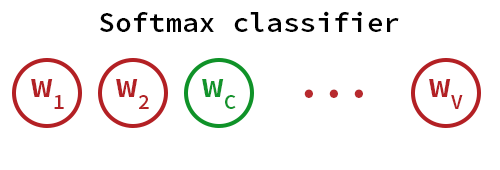
<style>
.page{position:relative;width:500px;height:170px;background:#ffffff}
.page>*{position:absolute;margin:0}
.t1{font:48px "SourceCodePro-Semibold";color:#000000}
.t2{font:36px "SourceCodePro-Semibold";color:#b32125}
.t3{font:36px "SourceCodePro-Semibold";color:#13942c}
.t4{font:72px "SourceCodePro-Semibold";color:#b72a2e}
</style>
<div class="page">
<p class="t1" style="left:100px;top:11px;width:299px;height:21px">Softmax classifier</p>
<p class="t2" style="left:31px;top:79px;width:33px;height:30px">w1</p>
<p class="t2" style="left:116px;top:79px;width:33px;height:30px">w2</p>
<p class="t3" style="left:202px;top:79px;width:34px;height:30px">wC</p>
<p class="t4" style="left:304px;top:89px;width:59px;height:9px">...</p>
<p class="t2" style="left:429px;top:79px;width:34px;height:30px">wV</p>
</div>
